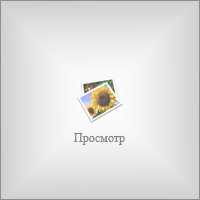
<style>
.page{position:relative;width:200px;height:200px}
.page>*{position:absolute;margin:0}
.t1{font:12px "TimesNewRomanPSMT";color:#858585}
</style>
<div class="page">
<p class="t1" style="left:74px;top:133px;width:51px;height:12px">Просмотр</p>
</div>
